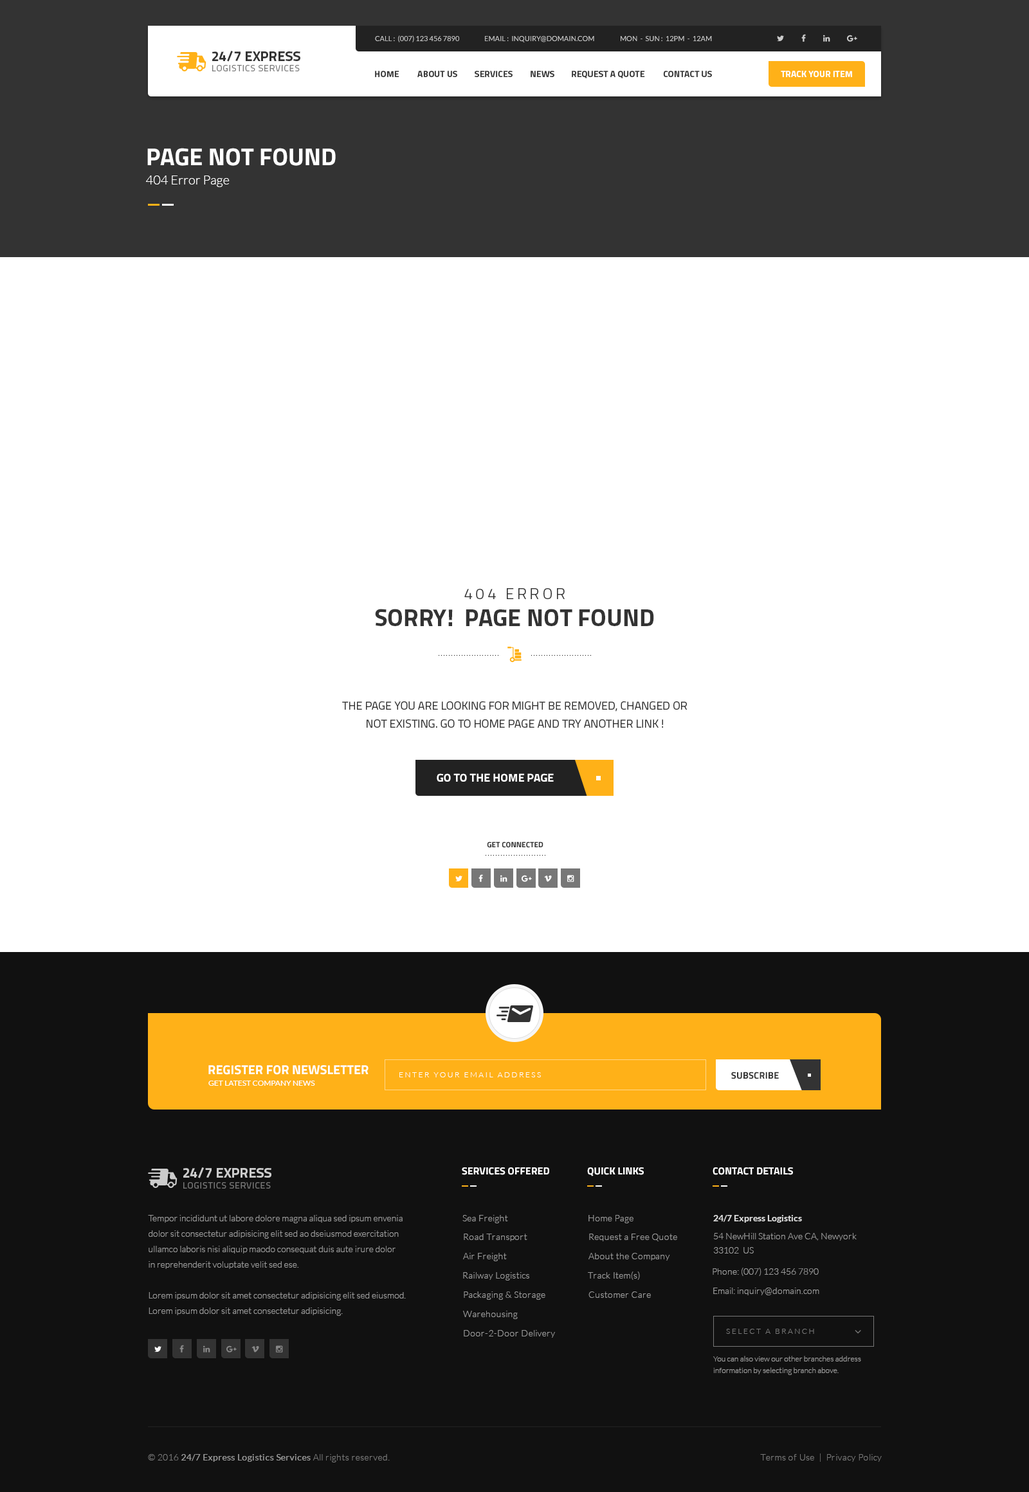
<style>
.page{position:relative;width:1029px;height:1492px;background:#ffffff}
.page>*{position:absolute;margin:0}
.t1{font:7.1px "Lato-Regular";color:#cccccc;text-transform:uppercase}
.t2{font:14.1px "Titillium-Bold";color:#333333;text-transform:uppercase}
.t3{font:9px "Titillium-Regular";letter-spacing:0.06em;color:#777777;text-transform:uppercase}
.t4{font:9px "Titillium-Bold";color:#333333;text-transform:uppercase}
.t5{font:9px "Titillium-Bold";color:#ffffff;text-transform:uppercase}
.t6{font:24.4px "Titillium-Bold";color:#ffffff;text-transform:uppercase}
.t7{font:12.9px "Lato-Light";color:#ffffff}
.t8{font:15.4px "Titillium-Light";letter-spacing:0.2em;color:#333333;text-transform:uppercase}
.t9{font:24.4px "Titillium-Bold";color:#333333;text-transform:uppercase}
.t10{font:11.6px/18px "Titillium-Regular";color:#333333;text-transform:uppercase}
.t11{font:11.6px "Titillium-Bold";color:#ffffff;text-transform:uppercase}
.t12{font:7.7px "Titillium-Bold";color:#333333;text-transform:uppercase}
.t13{font:12.9px "Titillium-Bold";color:#ffffff;text-transform:uppercase}
.t14{font:7.7px "Lato-Light";letter-spacing:0.2em;color:#ffffff;text-transform:uppercase}
.t15{font:9.6px "Titillium-Bold";color:#333333;text-transform:uppercase}
.t16{font:7.7px "Lato-Regular";color:#ffffff;text-transform:uppercase}
.t17{font:14.1px "Titillium-Bold";color:#cccccc;text-transform:uppercase}
.t18{font:10.3px "Titillium-Bold";color:#ffffff;text-transform:uppercase}
.t19{font:9px/15.4px "Lato-Light";color:#999999}
.t20{font:9px "Lato-Light";letter-spacing:0.02em;color:#999999}
.t21{font:9px "Lato-Bold";color:#dddddd}
.t22{font:9px/14.1px "Lato-Light";color:#999999}
.t23{font:9px "Lato-Light";color:#999999}
.t24{font:7.7px "Lato-Light";letter-spacing:0.2em;color:#777777;text-transform:uppercase}
.t25{font:7.7px/11.6px "Lato-Light";color:#999999}
.t26{font:9px "Lato-Regular";letter-spacing:0.025em;color:#999999}
.t27{font:9px "Lato-Light";letter-spacing:0.025em;color:#777777}
</style>
<div class="page">
<p class="t1" style="left:375px;top:35px;width:84px;height:7px">call :  (007) 123 456 7890</p>
<p class="t1" style="left:485px;top:36px;width:109px;height:6px">Email :  inquiry@domain.com</p>
<p class="t1" style="left:620px;top:36px;width:92px;height:5px">Mon  -  SUN :  12PM  -  12AM</p>
<p class="t2" style="left:212px;top:51px;width:88px;height:11px">24/7 EXpress</p>
<p class="t3" style="left:212px;top:65px;width:88px;height:6px">Logistics services</p>
<p class="t4" style="left:375px;top:71px;width:24px;height:6px">home</p>
<p class="t4" style="left:417px;top:71px;width:40px;height:6px">About us</p>
<p class="t4" style="left:474px;top:71px;width:38px;height:6px">Services</p>
<p class="t4" style="left:530px;top:71px;width:24px;height:6px">news</p>
<p class="t4" style="left:572px;top:71px;width:73px;height:7px">request a quote</p>
<p class="t4" style="left:663px;top:71px;width:49px;height:6px">Contact us</p>
<p class="t5" style="left:780px;top:71px;width:72px;height:6px">track your item</p>
<p class="t6" style="left:147px;top:148px;width:189px;height:18px">page not found</p>
<p class="t7" style="left:146px;top:176px;width:84px;height:11px">404 Error Page</p>
<p class="t8" style="left:464px;top:588px;width:100px;height:11px">404 error</p>
<p class="t9" style="left:375px;top:609px;width:279px;height:17px">sorry!  page not found</p>
<p class="t10" style="left:342px;top:701px;width:345px;height:27px;text-align:center">The page you are looking for might be removed, changed or<br>not existing. go to home page and try another link !</p>
<p class="t11" style="left:437px;top:773px;width:117px;height:9px">go to the home page</p>
<p class="t12" style="left:487px;top:842px;width:56px;height:6px">get connected</p>
<p class="t13" style="left:208px;top:1065px;width:160px;height:10px">register for newsletter</p>
<p class="t14" style="left:399px;top:1072px;width:142px;height:5px">enter your email address</p>
<p class="t15" style="left:731px;top:1072px;width:48px;height:7px">Subscribe</p>
<p class="t16" style="left:208px;top:1081px;width:107px;height:5px">get latest company news</p>
<p class="t17" style="left:183px;top:1167px;width:88px;height:11px">24/7 EXpress</p>
<p class="t18" style="left:462px;top:1167px;width:87px;height:8px">services offered</p>
<p class="t18" style="left:587px;top:1167px;width:57px;height:9px">Quick links</p>
<p class="t18" style="left:712px;top:1167px;width:81px;height:8px">Contact details</p>
<p class="t3" style="left:183px;top:1182px;width:88px;height:7px">Logistics services</p>
<p class="t19" style="left:148px;top:1215px;width:258px;height:101px">Tempor incididunt ut labore dolore magna aliqua sed ipsum envenia<br>dolor sit consectetur adipisicing elit sed ao dseiusmod exercitation<br>ullamco laboris nisi aliquip maodo consequat duis aute irure dolor <br>in reprehenderit voluptate velit sed ese. <br><br>Lorem ipsum dolor sit amet consectetur adipisicing elit sed eiusmod.<br>Lorem ipsum dolor sit amet consectetur adipisicing.</p>
<p class="t20" style="left:462px;top:1215px;width:46px;height:8px">Sea Freight</p>
<p class="t20" style="left:588px;top:1215px;width:45px;height:8px">Home Page</p>
<p class="t21" style="left:713px;top:1215px;width:89px;height:8px">24/7 Express Logistics</p>
<p class="t20" style="left:464px;top:1234px;width:63px;height:7px">Road Transport</p>
<p class="t20" style="left:589px;top:1234px;width:88px;height:7px">Request a Free Quote</p>
<p class="t22" style="left:713px;top:1233px;width:143px;height:21px">54 NewHill Station Ave CA, Newyork<br>33102  US</p>
<p class="t20" style="left:463px;top:1253px;width:44px;height:8px">Air Freight</p>
<p class="t20" style="left:588px;top:1253px;width:82px;height:8px">About the Company</p>
<p class="t20" style="left:463px;top:1272px;width:66px;height:9px">Railway Logistics</p>
<p class="t20" style="left:588px;top:1272px;width:52px;height:8px">Track Item(s)</p>
<p class="t23" style="left:712px;top:1268px;width:106px;height:8px">Phone: (007) 123 456 7890</p>
<p class="t23" style="left:713px;top:1288px;width:106px;height:7px">Email: inquiry@domain.com</p>
<p class="t20" style="left:464px;top:1292px;width:81px;height:8px">Packaging &amp; Storage</p>
<p class="t20" style="left:588px;top:1292px;width:63px;height:6px">Customer Care</p>
<p class="t20" style="left:463px;top:1311px;width:55px;height:8px">Warehousing</p>
<p class="t20" style="left:464px;top:1330px;width:91px;height:8px">Door-2-Door Delivery</p>
<p class="t24" style="left:726px;top:1329px;width:88px;height:5px">Select a branch</p>
<p class="t25" style="left:713px;top:1356px;width:148px;height:19px">You can also view our other branches address<br>information by selecting branch above.</p>
<p class="t26" style="left:148px;top:1454px;width:242px;height:8px"><span class="t27">© 2016 </span>24/7 Express Logistics Services <span class="t27">All rights reserved.</span></p>
<p class="t27" style="left:760px;top:1454px;width:121px;height:8px">Terms of Use  |  Privacy Policy</p>
</div>
